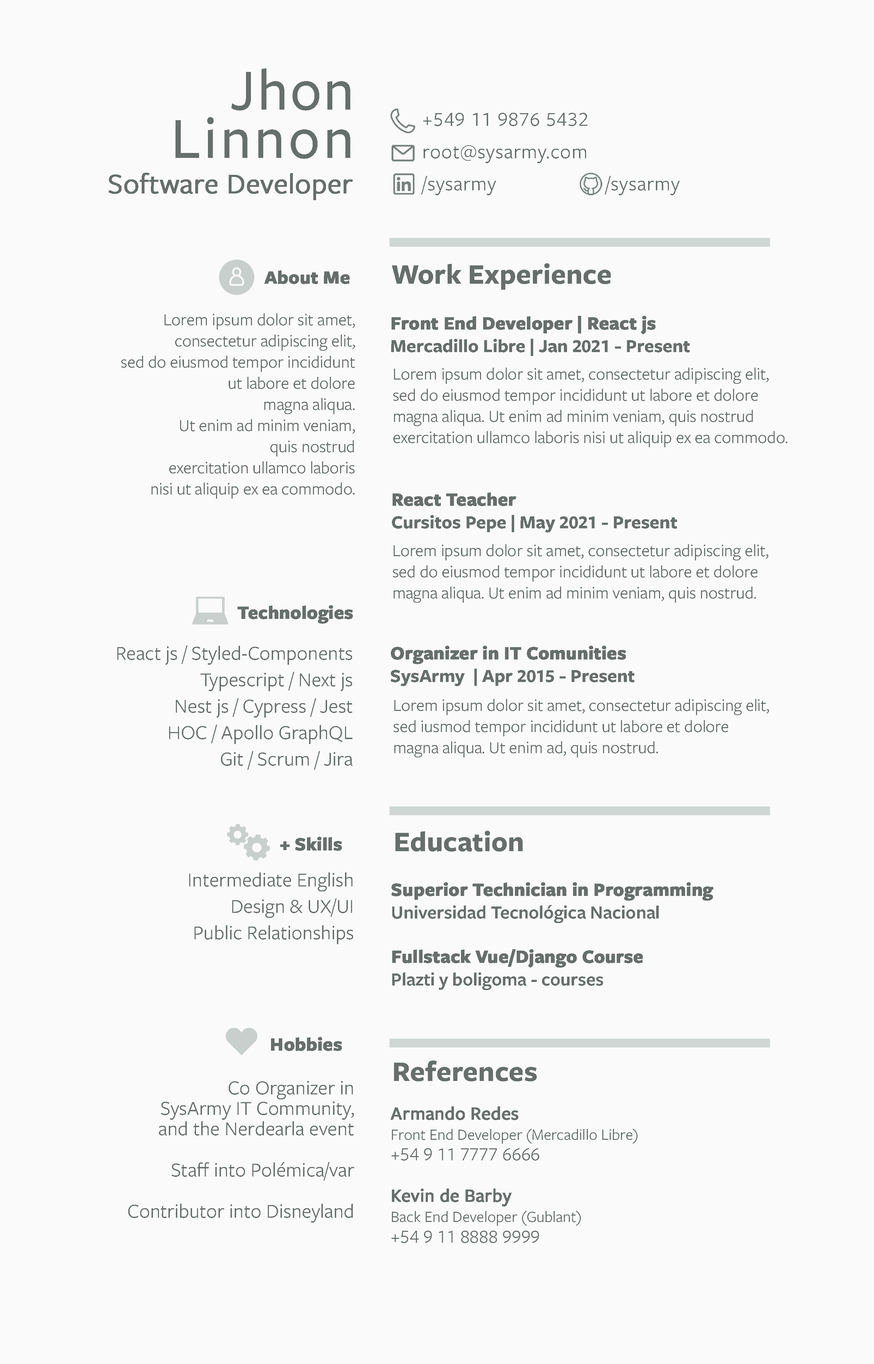
<style>
.page{position:relative;width:874px;height:1364px;background:#fafafa}
.page>*{position:absolute;margin:0}
.t1{font:60.2px/48.5px "FreightSansLFPro-Medium";letter-spacing:0.05em;color:#676f6d}
.t2{font:60.2px/48.5px "FreightSansLFPro-Medium";letter-spacing:0.025em;color:#676f6d}
.t3{font:20.6px/32.3px "FreightSansLFPro-Regular";letter-spacing:0.025em;color:#676f6d}
.t4{font:29.4px "FreightSansLFPro-Regular";color:#676f6d;font-weight:bold}
.t5{font:29.4px "FreightSansLFPro-Bold";color:#676f6d}
.t6{font:19.1px "FreightSansLFPro-Bold";letter-spacing:-0.005em;color:#676f6d;font-weight:bold}
.t7{font:17.6px "FreightSansLFPro-Regular";letter-spacing:-0.01em;color:#676f6d}
.t8{font:19.1px "FreightSansLFPro-Bold";letter-spacing:-0.005em;color:#676f6d}
.t9{font:20.6px/26.4px "FreightSansLFPro-Regular";color:#676f6d}
.t10{font:19.1px "FreightSansLFPro-Semibold";letter-spacing:-0.005em;color:#676f6d}
.t11{font:20.6px/20.6px "FreightSansLFPro-Regular";color:#676f6d}
.t12{font:16.2px/20.6px "FreightSansLFPro-Regular";letter-spacing:-0.005em;color:#676f6d}
.t13{font:19.1px/20.6px "FreightSansLFPro-Medium";letter-spacing:-0.005em;color:#676f6d;font-weight:bold}
.t14{font:19.1px/20.6px "FreightSansLFPro-Regular";letter-spacing:-0.005em;color:#676f6d}
</style>
<div class="page">
<p class="t1" style="left:176px;top:68px;width:174px;height:91px;text-align:right"><span class="t2">Jhon<br></span>Linnon</p>
<p class="t3" style="left:421px;top:113px;width:259px;height:82px">+549 11 9876 5432<br>root@sysarmy.com<br>/sysarmy                     /sysarmy</p>
<p class="t4" style="left:109px;top:173px;width:244px;height:27px">Software Developer</p>
<p class="t5" style="left:392px;top:263px;width:219px;height:27px">Work Experience</p>
<p class="t6" style="left:264px;top:270px;width:86px;height:14px">About Me</p>
<p class="t7" style="left:121px;top:313px;width:234px;height:186px;text-align:right">Lorem ipsum dolor sit amet, <br>consectetur adipiscing elit, <br>sed do eiusmod tempor incididunt <br>ut labore et dolore <br>magna aliqua. <br>Ut enim ad minim veniam, <br>quis nostrud <br>exercitation ullamco laboris <br>nisi ut aliquip ex ea commodo.</p>
<p class="t8" style="left:391px;top:316px;width:299px;height:40px"><span class="t6">Front End Developer | React js<br></span>Mercadillo Libre | Jan 2021 - Present</p>
<p class="t7" style="left:393px;top:368px;width:394px;height:79px">Lorem ipsum dolor sit amet, consectetur adipiscing elit, <br>sed do eiusmod tempor incididunt ut labore et dolore <br>magna aliqua. Ut enim ad minim veniam, quis nostrud <br>exercitation ullamco laboris nisi ut aliquip ex ea commodo.</p>
<p class="t8" style="left:392px;top:492px;width:285px;height:41px"><span class="t6">React Teacher<br></span>Cursitos Pepe | May 2021 - Present</p>
<p class="t7" style="left:393px;top:544px;width:375px;height:59px">Lorem ipsum dolor sit amet, consectetur adipiscing elit, <br>sed do eiusmod tempor incididunt ut labore et dolore <br>magna aliqua. Ut enim ad minim veniam, quis nostrud.</p>
<p class="t6" style="left:238px;top:605px;width:115px;height:19px">Technologies</p>
<p class="t9" style="left:117px;top:645px;width:235px;height:125px;text-align:right">React js / Styled-Components<br>Typescript / Next js<br> Nest js / Cypress / Jest<br>  HOC / Apollo GraphQL<br>Git / Scrum / Jira</p>
<p class="t8" style="left:391px;top:646px;width:243px;height:40px"><span class="t6">Organizer in IT Comunities<br></span>SysArmy  | Apr 2015 - Present</p>
<p class="t7" style="left:394px;top:699px;width:375px;height:58px">Lorem ipsum dolor sit amet, consectetur adipiscing elit, <br>sed iusmod tempor incididunt ut labore et dolore <br>magna aliqua. Ut enim ad, quis nostrud.</p>
<p class="t5" style="left:395px;top:831px;width:128px;height:21px">Education</p>
<p class="t6" style="left:280px;top:837px;width:62px;height:14px">+ Skills</p>
<p class="t9" style="left:189px;top:872px;width:164px;height:72px;text-align:right">Intermediate English<br>Design &amp; UX/UI<br>Public Relationships</p>
<p class="t6" style="left:392px;top:882px;width:321px;height:41px">Superior Technician in Programming<br><span class="t10">Universidad Tecnológica Nacional</span></p>
<p class="t6" style="left:392px;top:949px;width:251px;height:41px">Fullstack Vue/Django Course<br><span class="t10">Plazti y boligoma - courses</span></p>
<p class="t6" style="left:271px;top:1037px;width:71px;height:14px">Hobbies</p>
<p class="t5" style="left:394px;top:1061px;width:143px;height:20px">References</p>
<p class="t11" style="left:128px;top:1081px;width:226px;height:142px;text-align:right">Co Organizer in<br>SysArmy IT Community,<br>and the Nerdearla event<br><br>Staff into Polémica/var<br><br>Contributor into Disneyland</p>
<p class="t12" style="left:391px;top:1106px;width:247px;height:137px"><span class="t13">Armando Redes  <br></span>Front End Developer (Mercadillo Libre)<br><span class="t14">+54 9 11 7777 6666<br><br></span><span class="t13">Kevin de Barby<br></span>Back End Developer (Gublant)<br><span class="t14">+54 9 11 8888 9999</span></p>
</div>
